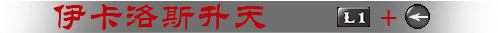
<style>
.page{position:relative;width:498px;height:33px;background:#707070}
.page>*{position:absolute;margin:0}
.t1{font:36px "STLiti";color:#ba060b}
</style>
<div class="page">
<p class="t1" style="left:53px;top:3px;width:344px;height:27px">伊卡洛斯升天   +</p>
</div>
